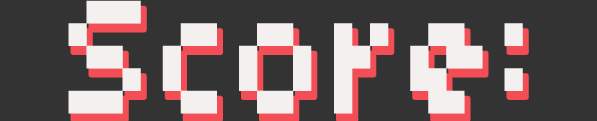
<style>
.page{position:relative;width:597px;height:121px;background:#333333}
.page>*{position:absolute;margin:0}
.t1{font:180px "04b03";letter-spacing:0.05em;color:#f4f0f0;scale:0.8 1}
</style>
<div class="page">
<p class="t1" style="left:68px;top:0px;width:455px;height:114px">Score:</p>
</div>
